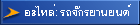
<style>
.page{position:relative;width:140px;height:25px}
.page>*{position:absolute;margin:0}
.t1{font:15.3px "EucrosiaDSE";color:#ffffff;scale:1.12 1}
</style>
<div class="page">
<p class="t1" style="left:25px;top:4px;width:106px;height:12px">ÍÐäËÅè:Ã¶¨Ñ¡ÃÂÒ¹Â¹µì</p>
</div>
